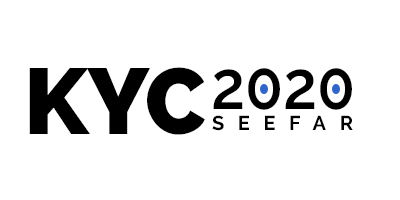
<style>
.page{position:relative;width:400px;height:200px;background:#ffffff}
.page>*{position:absolute;margin:0}
.t1{font:93px "Raleway-Heavy";color:#000000}
.t2{font:68.2px "Raleway-SemiBold";color:#000000;scale:0.91 1}
.t3{font:20px "Raleway-Bold";letter-spacing:0.68em;color:#000000;text-transform:uppercase}
</style>
<div class="page">
<p class="t1" style="left:29px;top:67px;width:176px;height:68px">KYC</p>
<p class="t2" style="left:213px;top:68px;width:139px;height:42px">2020</p>
<p class="t3" style="left:212px;top:115px;width:141px;height:16px">Seefar</p>
</div>
